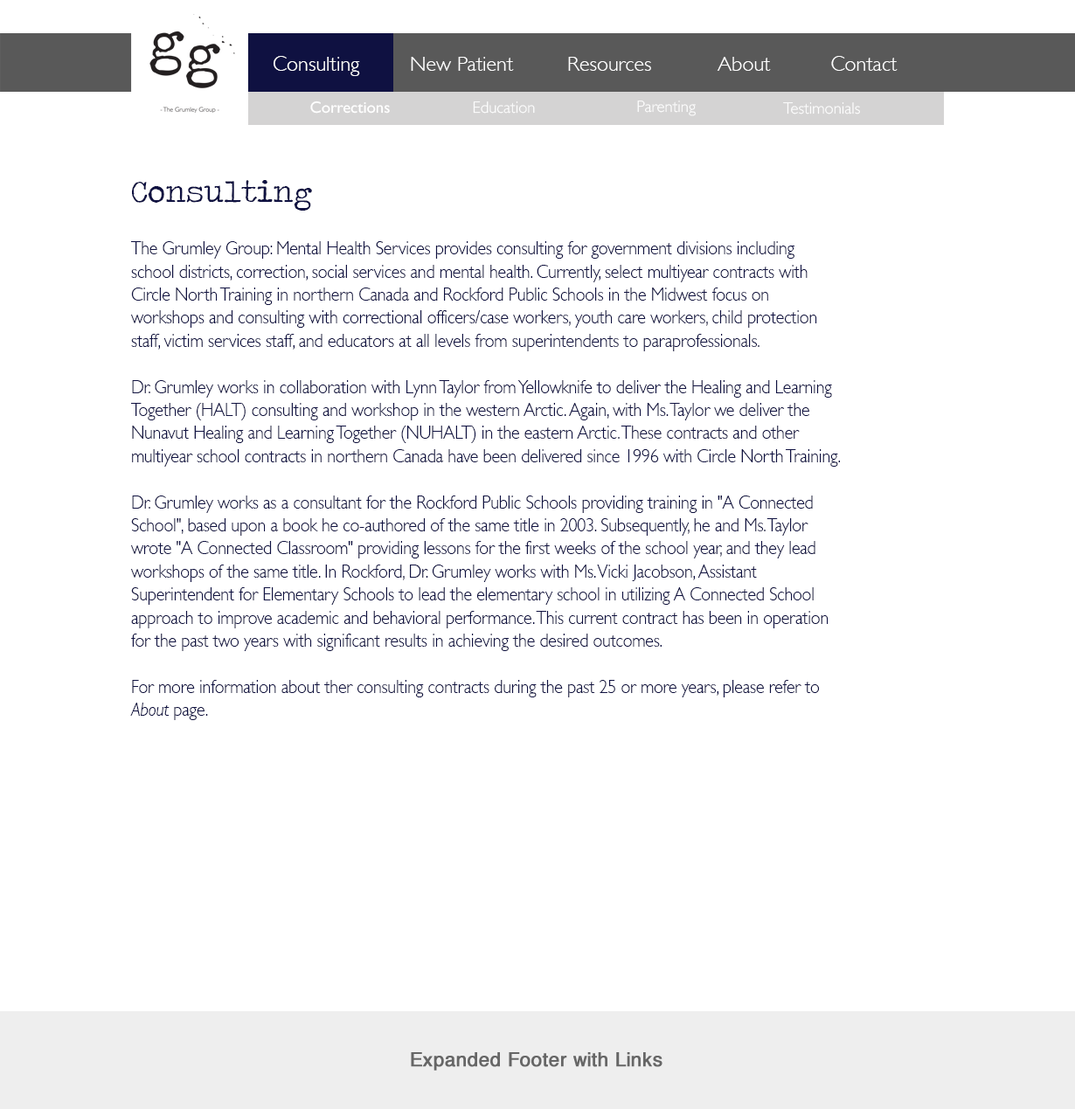
<style>
.page{position:relative;width:1075px;height:1109px;background:#ffffff}
.page>*{position:absolute;margin:0}
.t1{font:21px "GillSans-Light";color:#ffffff}
.t2{font:16.3px "GillSans";color:#ffffff}
.t3{font:16.3px "GillSans-Light";color:#fefefe}
.t4{font:31.5px "TravelingTypewriter";color:#0f1141}
.t5{font:19.2px "GillSans-Light";color:#0f1141;scale:0.89 1}
.t6{font:19.2px "GillSans-LightItalic";color:#0f1141;scale:0.89 1}
</style>
<div class="page">
<p class="t1" style="left:274px;top:56px;width:624px;height:20px">Consulting    New Patient    Resources   About      Contact</p>
<p class="t2" style="left:310px;top:101px;width:80px;height:13px">Corrections</p>
<p class="t3" style="left:473px;top:101px;width:62px;height:13px">Education</p>
<p class="t3" style="left:637px;top:101px;width:59px;height:15px">Parenting</p>
<p class="t3" style="left:783px;top:102px;width:77px;height:12px">Testimonials</p>
<p class="t4" style="left:132px;top:180px;width:180px;height:31px">Consulting</p>
<p class="t5" style="left:130px;top:241px;width:710px;height:479px">The Grumley Group: Mental Health Services provides consulting for government divisions including school districts, correction, social services and mental health. Currently, select multiyear contracts with Circle North Training in northern Canada and Rockford Public Schools in the Midwest focus on workshops and consulting with correctional officers/case workers, youth care workers, child protection staff, victim services staff, and educators at all levels from superintendents to paraprofessionals.<br><br>Dr. Grumley works in collaboration with Lynn Taylor from Yellowknife to deliver the Healing and Learning Together (HALT) consulting and workshop in the western Arctic. Again, with Ms. Taylor we deliver the Nunavut Healing and Learning Together (NUHALT) in the eastern Arctic. These contracts and other multiyear school contracts in northern Canada have been delivered since 1996 with Circle North Training. <br><br>Dr. Grumley works as a consultant for the Rockford Public Schools providing training in "A Connected School", based upon a book he co-authored of the same title in 2003. Subsequently, he and Ms. Taylor wrote "A Connected Classroom" providing lessons for the first weeks of the school year, and they lead workshops of the same title. In Rockford, Dr. Grumley works with Ms. Vicki Jacobson, Assistant Superintendent for Elementary Schools to lead the elementary school in utilizing A Connected School approach to improve academic and behavioral performance. This current contract has been in operation for the past two years with significant results in achieving the desired outcomes.<br><br>For more information about ther consulting contracts during the past 25 or more years, please refer to <span class="t6">About </span>page.</p>
</div>
